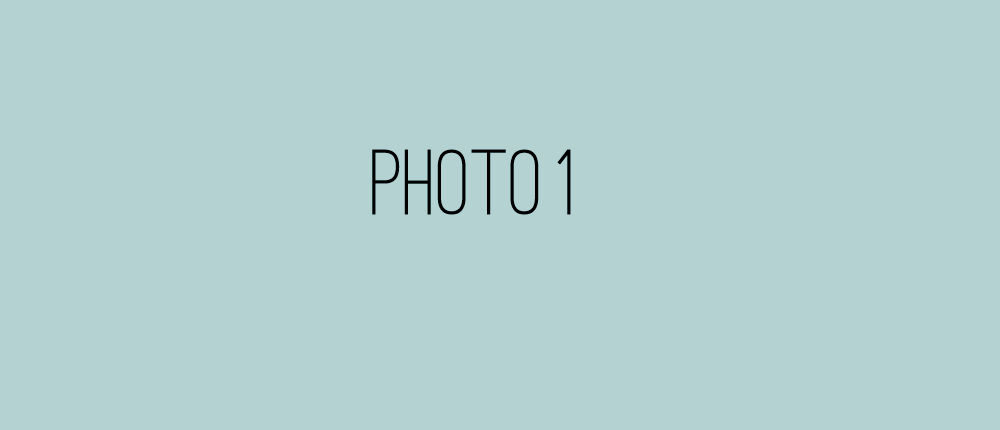
<style>
.page{position:relative;width:1000px;height:430px;background:#b5d2d3}
.page>*{position:absolute;margin:0}
.t1{font:96px "OstrichSans-Medium";color:#000000}
</style>
<div class="page">
<p class="t1" style="left:372px;top:149px;width:199px;height:66px">Photo 1</p>
</div>
